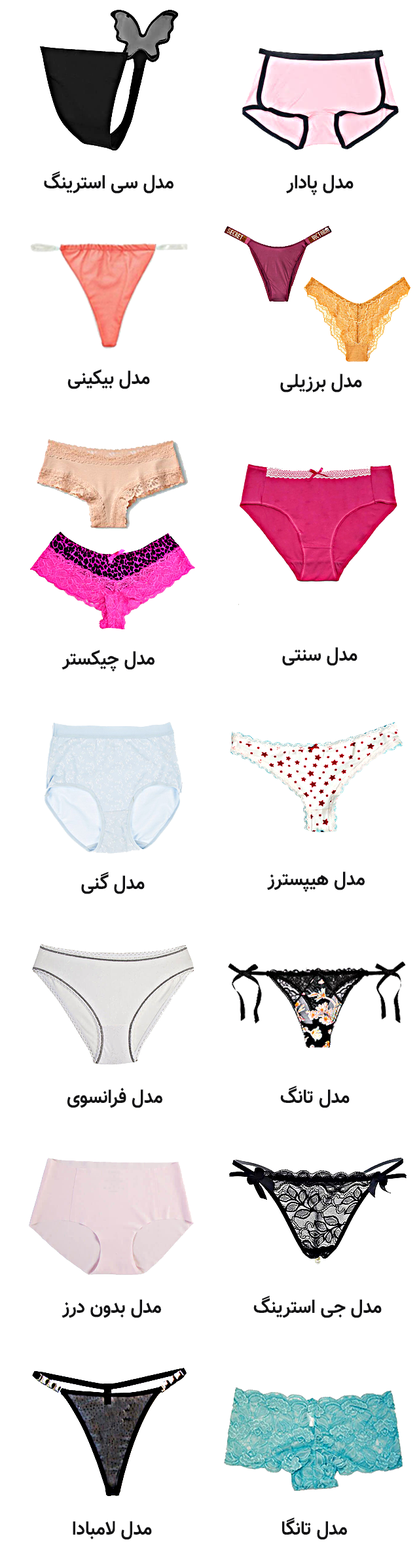
<style>
.page{position:relative;width:419px;height:1568px;background:#ffffff}
.page>*{position:absolute;margin:0}
.t1{font:19.6px "Vazir-Bold";color:#121214;scale:0.93 1}
</style>
<div class="page">
<p class="t1" style="left:44px;top:171px;width:129px;height:23px">مدل سی استرینگ</p>
<p class="t1" style="left:286px;top:175px;width:67px;height:21px">مدل پادار</p>
<p class="t1" style="left:67px;top:369px;width:83px;height:20px">مدل بیکینی</p>
<p class="t1" style="left:280px;top:374px;width:82px;height:18px">مدل برزیلی</p>
<p class="t1" style="left:61px;top:650px;width:93px;height:22px">مدل چیکستر</p>
<p class="t1" style="left:282px;top:647px;width:75px;height:19px">مدل سنتی</p>
<p class="t1" style="left:81px;top:871px;width:64px;height:23px">مدل گنی</p>
<p class="t1" style="left:267px;top:871px;width:97px;height:21px">مدل هیپسترز</p>
<p class="t1" style="left:280px;top:1085px;width:69px;height:23px">مدل تانگ</p>
<p class="t1" style="left:67px;top:1087px;width:95px;height:21px">مدل فرانسوی</p>
<p class="t1" style="left:61px;top:1299px;width:100px;height:19px">مدل بدون درز</p>
<p class="t1" style="left:253px;top:1295px;width:128px;height:23px">مدل جی استرینگ</p>
<p class="t1" style="left:282px;top:1517px;width:65px;height:23px">مدل تانگا</p>
<p class="t1" style="left:73px;top:1521px;width:79px;height:19px">مدل لامبادا</p>
</div>
